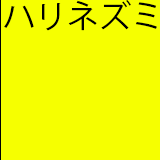
<style>
.page{position:relative;width:160px;height:160px;background:#f6ff00}
.page>*{position:absolute;margin:0}
.t1{font:32px "KozGoPr6N-Regular";color:#000000}
</style>
<div class="page">
<p class="t1" style="left:4px;top:0px;width:153px;height:31px">ハリネズミ</p>
</div>
